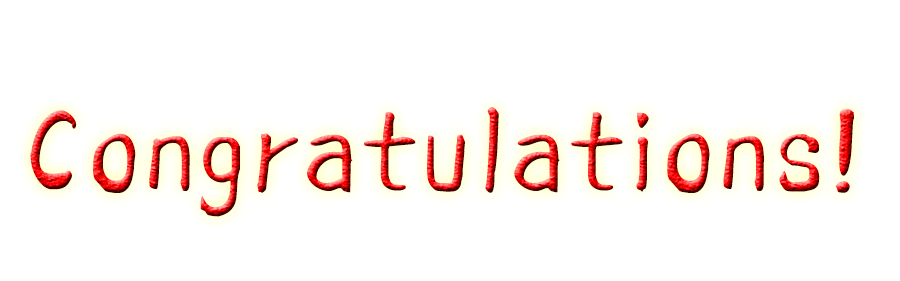
<style>
.page{position:relative;width:900px;height:281px;background:#ffffff}
.page>*{position:absolute;margin:0}
.t1{font:140px "FZZJ-LJDXKJW"}
</style>
<div class="page">
<p class="t1" style="left:30px;top:107px;width:824px;height:110px">Congratulations!</p>
</div>
